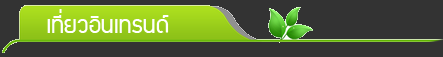
<style>
.page{position:relative;width:443px;height:57px;background:#333333}
.page>*{position:absolute;margin:0}
.t1{font:26px "supermarket";color:#ffffff}
</style>
<div class="page">
<p class="t1" style="left:47px;top:9px;width:122px;height:24px">เที่ยวอินเทรนด์</p>
</div>
